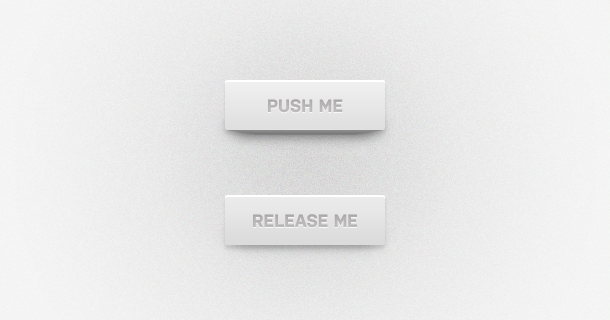
<style>
.page{position:relative;width:610px;height:320px}
.page>*{position:absolute;margin:0}
.t1{font:18px "Nudista-Bold";color:#b7b5b6;text-transform:uppercase}
.t2{font:18px "Nudista-Bold";color:#b5b3b4;text-transform:uppercase}
</style>
<div class="page">
<p class="t1" style="left:268px;top:99px;width:75px;height:14px">Push me</p>
<p class="t2" style="left:253px;top:214px;width:104px;height:14px">Release me</p>
</div>
